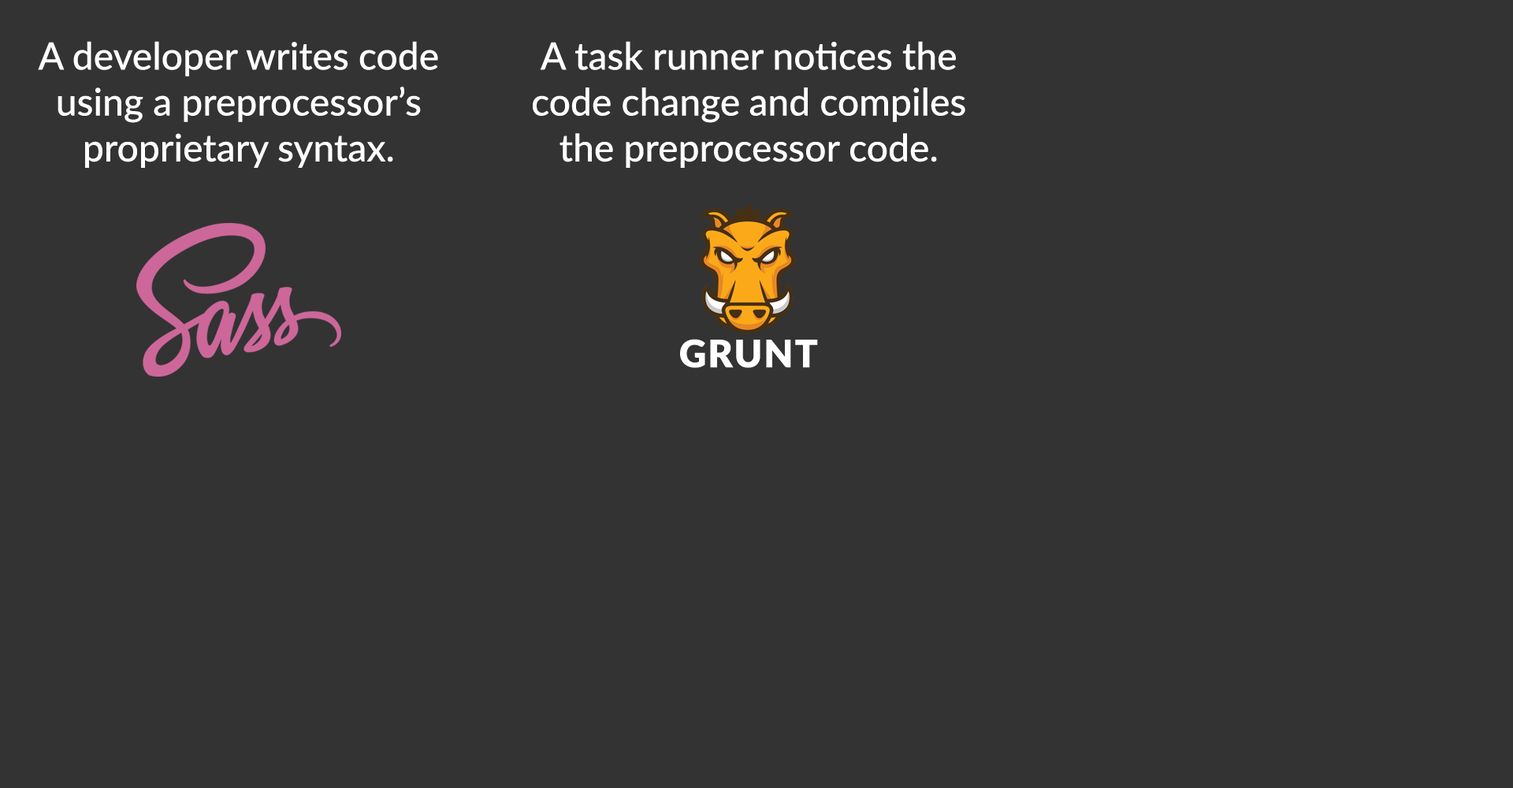
<style>
.page{position:relative;width:1513px;height:788px;background:#333333}
.page>*{position:absolute;margin:0}
.t1{font:37.8px/45.9px "Lato-Medium";color:#ffffff}
.t2{font:37.8px "Lato-Black";letter-spacing:0.04em;color:#ffffff}
</style>
<div class="page">
<p class="t1" style="left:38px;top:41px;width:400px;height:127px;text-align:center">A developer writes code using a preprocessor’s proprietary syntax.</p>
<p class="t1" style="left:533px;top:41px;width:432px;height:127px;text-align:center">A task runner notices the code change and compiles the preprocessor code.</p>
<p class="t2" style="left:680px;top:339px;width:138px;height:29px">GRUNT</p>
</div>
